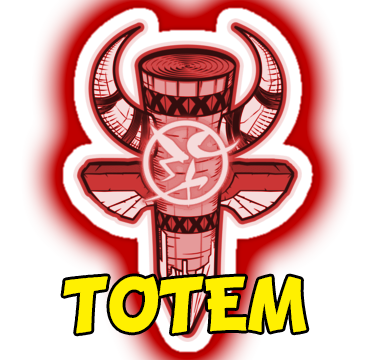
<style>
.page{position:relative;width:375px;height:360px;background:#ffffff}
.page>*{position:absolute;margin:0}
.t1{font:60px "BDCartoonShout";color:#fff000}
</style>
<div class="page">
<p class="t1" style="left:63px;top:276px;width:244px;height:58px">TOTEM</p>
</div>
